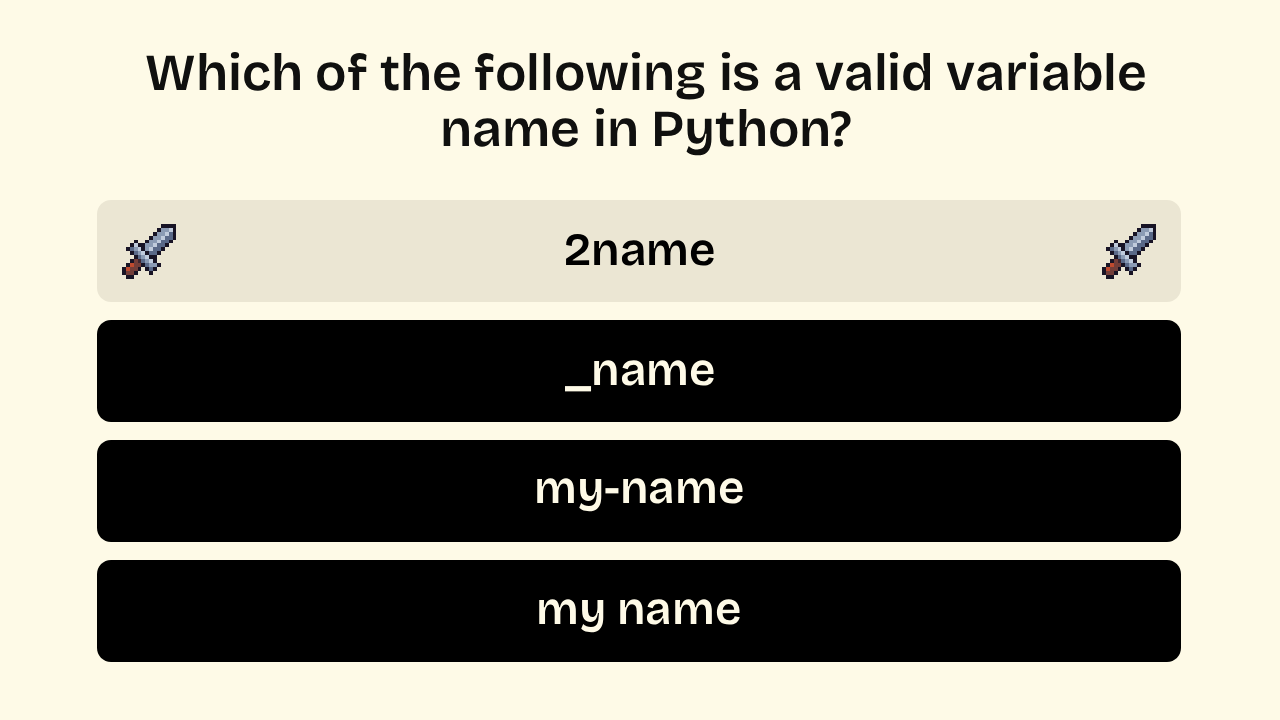
<style>
.page{position:relative;width:1280px;height:720px;background:#fefae7}
.page>*{position:absolute;margin:0}
.t1{font:52px/56px "BricolageGrotesque96ptExtraBold-SemiBold";color:#10100f}
.t2{font:46px "BricolageGrotesque96ptExtraBold-SemiBold";color:#000000}
.t3{font:46px "BricolageGrotesque96ptExtraBold-SemiBold";color:#fefae7}
</style>
<div class="page">
<p class="t1" style="left:146px;top:51px;width:999px;height:105px;text-align:center">Which of the following is a valid variable <br>name in Python?</p>
<p class="t2" style="left:566px;top:233px;width:148px;height:33px">2name</p>
<p class="t3" style="left:565px;top:360px;width:149px;height:32px">_name</p>
<p class="t3" style="left:537px;top:478px;width:206px;height:34px">my-name</p>
<p class="t3" style="left:539px;top:599px;width:201px;height:34px">my name</p>
</div>
